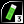
<style>
.page{position:relative;width:24px;height:24px;background:#000000}
.page>*{position:absolute;margin:0}
.t1{font:7.9px "Montserrat-Bold";color:#000000}
</style>
<div class="page">
<p class="t1" style="left:17px;top:16px;width:5px;height:6px">3</p>
</div>
